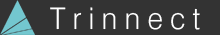
<style>
.page{position:relative;width:220px;height:35px;background:#333333}
.page>*{position:absolute;margin:0}
.t1{font:30px "CATIA-Symbols";letter-spacing:0.225em;color:#ffffff}
</style>
<div class="page">
<p class="t1" style="left:50px;top:7px;width:150px;height:23px">Trinnect</p>
</div>
